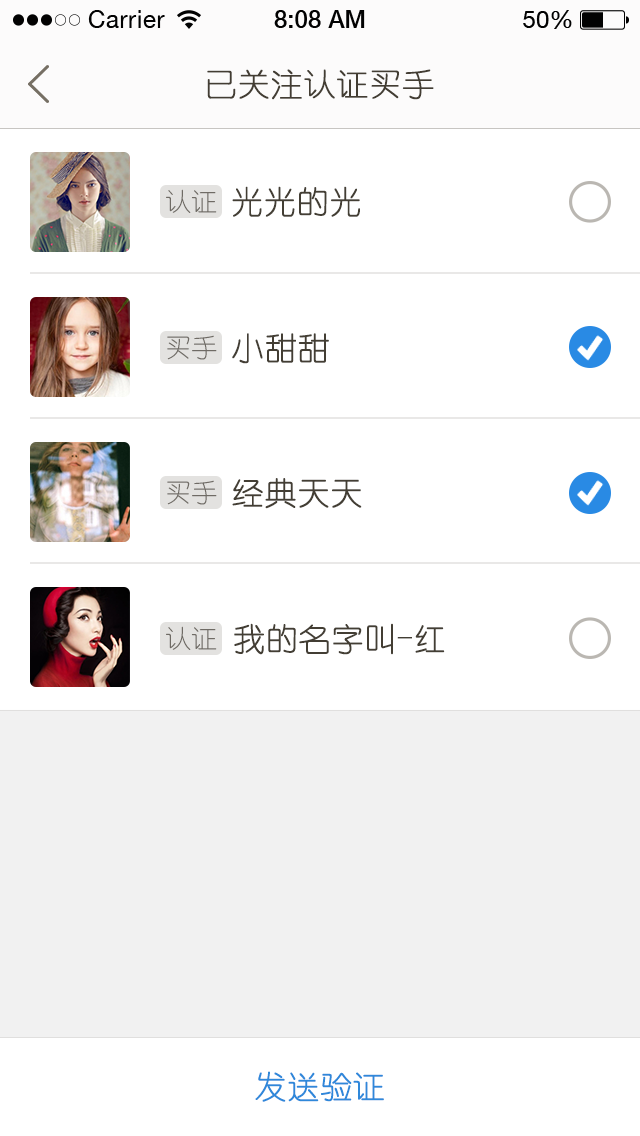
<style>
.page{position:relative;width:640px;height:1136px;background:#ffffff}
.page>*{position:absolute;margin:0}
.t1{font:32px "YouYuan";color:#433d33;text-transform:uppercase;font-weight:bold}
.t2{font:26px "YouYuan";color:#6f6b65;text-transform:uppercase}
.t3{font:32px "YouYuan";color:#433e34;text-transform:uppercase;font-weight:bold}
.t4{font:32px "YouYuan";color:#2f88da;text-transform:uppercase;font-weight:bold}
</style>
<div class="page">
<p class="t1" style="left:207px;top:69px;width:227px;height:31px">已关注认证买手</p>
<p class="t2" style="left:166px;top:189px;width:51px;height:24px">认证</p>
<p class="t3" style="left:232px;top:186px;width:128px;height:31px">光光的光</p>
<p class="t2" style="left:167px;top:335px;width:50px;height:25px">买手</p>
<p class="t3" style="left:232px;top:333px;width:97px;height:31px">小甜甜</p>
<p class="t2" style="left:167px;top:480px;width:50px;height:25px">买手</p>
<p class="t3" style="left:232px;top:478px;width:130px;height:31px">经典天天</p>
<p class="t2" style="left:166px;top:626px;width:51px;height:24px">认证</p>
<p class="t3" style="left:234px;top:623px;width:211px;height:32px">我的名字叫-红</p>
<p class="t4" style="left:255px;top:1071px;width:129px;height:31px">发送验证</p>
</div>
